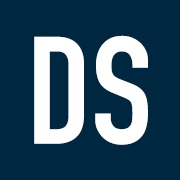
<style>
.page{position:relative;width:180px;height:180px;background:#002740}
.page>*{position:absolute;margin:0}
.t1{font:150px "DINCondensed-Bold";color:#ffffff}
</style>
<div class="page">
<p class="t1" style="left:34px;top:35px;width:114px;height:110px">DS</p>
</div>
